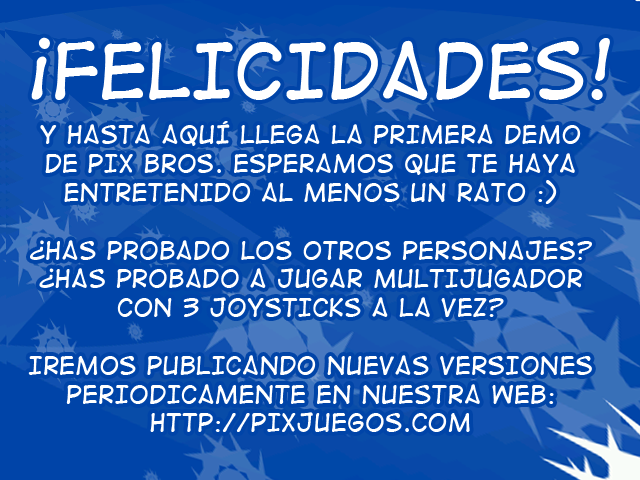
<style>
.page{position:relative;width:640px;height:480px;background:#0044a8}
.page>*{position:absolute;margin:0}
.t1{font:72px "DigitalStrip2";color:#ffffff}
.t2{font:24px "DigitalStrip2";color:#ffffff}
</style>
<div class="page">
<p class="t1" style="left:31px;top:37px;width:579px;height:64px">¡FELICIDADES!</p>
<p class="t2" style="left:28px;top:121px;width:564px;height:311px;text-align:center">y HASTA AQUÍ LLEGA LA PRIMERA DEMO DE PIX BROS. ESPERAMOS QUE TE HAYA ENTRETENIDO AL MENOS UN RATO :)<br><br>¿HAS PROBADO LOS OTROS PERSONAJES?<br>¿HAS PROBADO A JUGAR MULTIJUGADOR CON 3 JOYSTICKS A LA VEZ?<br><br>IREMOS PUBLICANDO NUEVAS VERSIONES PERIODICAMENTE EN NUESTRA WEB:<br>HTTP://PIXJUEGOS.COM</p>
</div>
